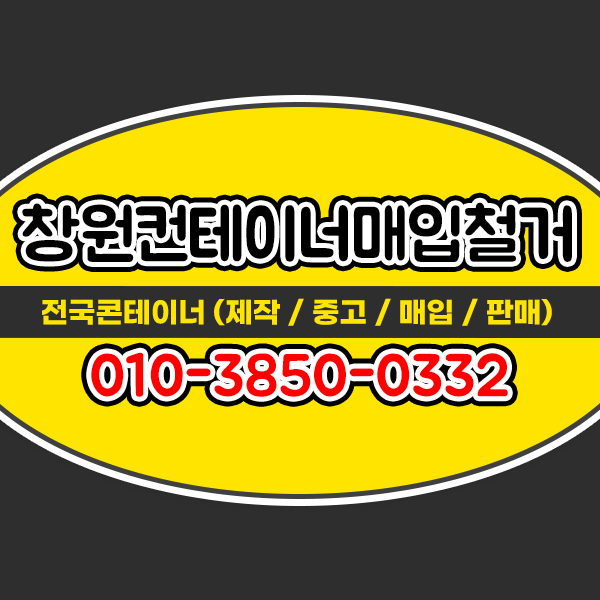
<style>
.page{position:relative;width:600px;height:600px;background:#2e2e2e}
.page>*{position:absolute;margin:0}
.t1{font:70px "BMJUAOTF";letter-spacing:-0.03em;color:#000000}
.t2{font:29.1px "GmarketSansBold";letter-spacing:-0.015em;color:#ffe400}
.t3{font:60px "BMJUAOTF";letter-spacing:-0.015em;color:#ff0000}
</style>
<div class="page">
<p class="t1" style="left:22px;top:202px;width:550px;height:60px">창원컨테이너매입철거</p>
<p class="t2" style="left:42px;top:298px;width:510px;height:28px">전국콘테이너 (제작 / 중고 / 매입 / 판매)</p>
<p class="t3" style="left:91px;top:352px;width:417px;height:45px">010-3850-0332</p>
</div>
